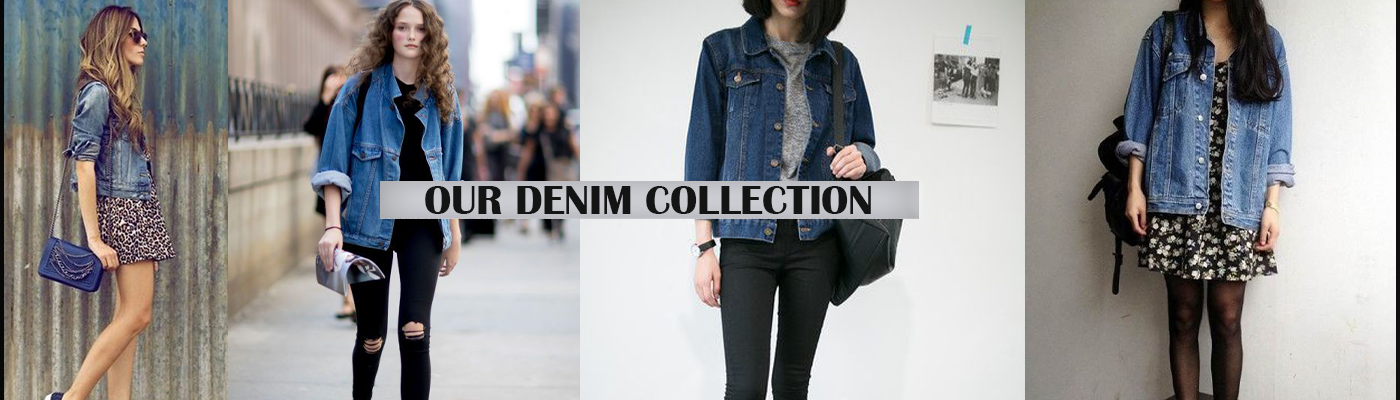
<style>
.page{position:relative;width:1400px;height:400px}
.page>*{position:absolute;margin:0}
.t1{font:41.7px "BritannicBold";color:#141414}
</style>
<div class="page">
<p class="t1" style="left:425px;top:186px;width:446px;height:28px">OUR DENIM COLLECTION</p>
</div>
